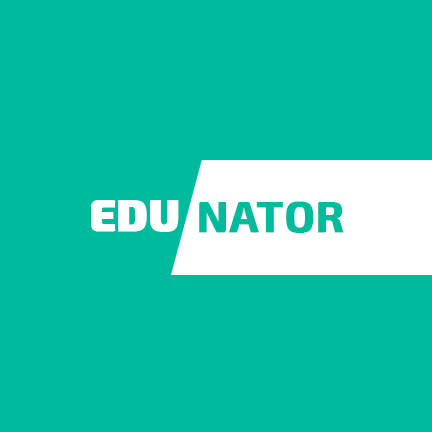
<style>
.page{position:relative;width:432px;height:432px;background:#00bb9b}
.page>*{position:absolute;margin:0}
.t1{font:44px "Exo2-Black";color:#ffffff;font-weight:bold}
.t2{font:44px "Exo2-Bold";color:#00bb9b;font-weight:bold}
</style>
<div class="page">
<p class="t1" style="left:91px;top:200px;width:88px;height:32px">EDU</p>
<p class="t2" style="left:199px;top:201px;width:145px;height:32px">NATOR</p>
</div>
